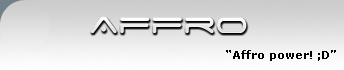
<style>
.page{position:relative;width:344px;height:70px}
.page>*{position:absolute;margin:0}
.t1{font:36px "SpaceAge";color:#f4f4f4}
.t2{font:11px "Verdana-Bold";color:#000000}
</style>
<div class="page">
<p class="t1" style="left:90px;top:16px;width:157px;height:17px">Affro</p>
<p class="t2" style="left:226px;top:50px;width:110px;height:11px">“Affro power! ;D”</p>
</div>
